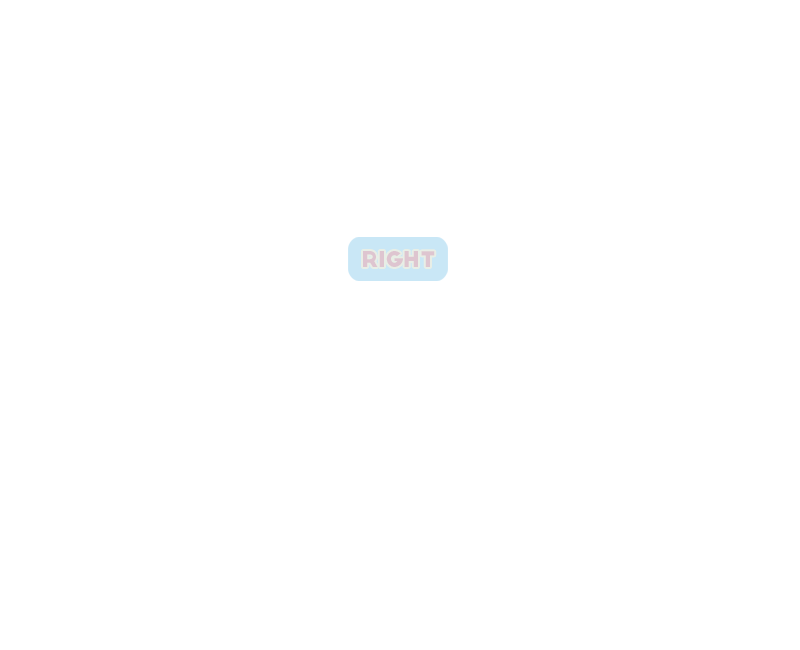
<style>
.page{position:relative;width:800px;height:650px;background:#ffffff}
.page>*{position:absolute;margin:0}
.t1{font:21.2px "BigJohn";color:#dec5d0}
</style>
<div class="page">
<p class="t1" style="left:363px;top:251px;width:72px;height:16px">Right</p>
</div>
